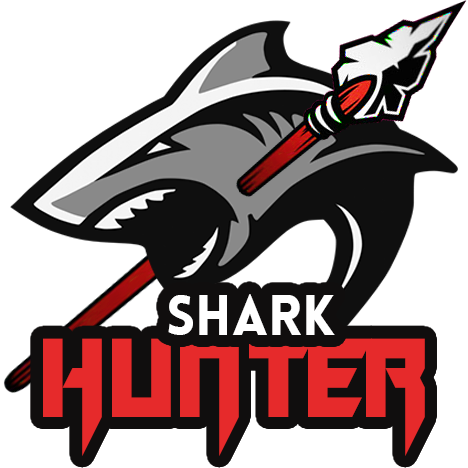
<style>
.page{position:relative;width:468px;height:468px;background:#ffffff}
.page>*{position:absolute;margin:0}
.t1{font:55.2px "Lovelo-Black";color:#ffffff}
.t2{font:68.5px "DeathHector";color:#e62a2b}
</style>
<div class="page">
<p class="t1" style="left:168px;top:294px;width:167px;height:41px">SHARK</p>
<p class="t2" style="left:43px;top:338px;width:382px;height:118px;text-align:center">HUNTER</p>
</div>
